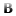
<style>
.page{position:relative;width:16px;height:16px;background:#ffffff}
.page>*{position:absolute;margin:0}
.t1{font:14px "Tahoma-Bold"}
</style>
<div class="page">
<p class="t1" style="left:4px;top:3px;width:9px;height:10px">B</p>
</div>
